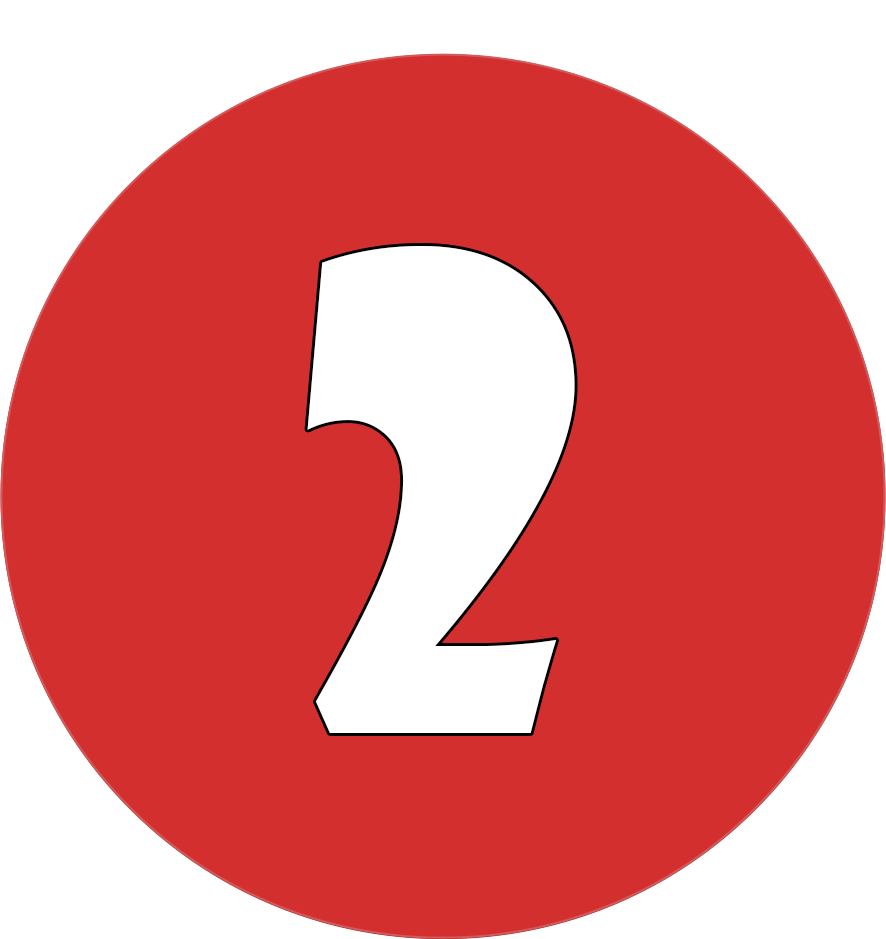
<style>
.page{position:relative;width:886px;height:939px;background:#d32f2f}
.page>*{position:absolute;margin:0}
.t1{font:637.2px "ShowcardGothic-Reg";color:#ffffff}
</style>
<div class="page">
<p class="t1" style="left:307px;top:246px;width:268px;height:487px">2</p>
</div>
